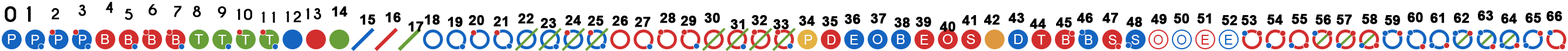
<style>
.page{position:relative;width:1568px;height:51px;background:#ffffff}
.page>*{position:absolute;margin:0}
.t1{font:19.6px "CaviarDreams-Bold";color:#000000;font-weight:bold}
.t2{font:14px "CaviarDreams-Bold";color:#000000;font-weight:bold}
.t3{font:14px "Arial-BoldMT";color:#000000;font-weight:bold}
</style>
<div class="page">
<p class="t1" style="left:5px;top:6px;width:11px;height:16px">0</p>
<p class="t1" style="left:26px;top:6px;width:5px;height:16px">1</p>
<p class="t2" style="left:78px;top:5px;width:8px;height:11px">3</p>
<p class="t2" style="left:105px;top:2px;width:8px;height:11px">4</p>
<p class="t2" style="left:149px;top:4px;width:8px;height:12px">6</p>
<p class="t2" style="left:174px;top:6px;width:8px;height:12px">7</p>
<p class="t2" style="left:192px;top:6px;width:9px;height:12px">8</p>
<p class="t2" style="left:51px;top:8px;width:8px;height:12px">2</p>
<p class="t2" style="left:125px;top:9px;width:8px;height:11px">5</p>
<p class="t2" style="left:218px;top:6px;width:8px;height:12px">9</p>
<p class="t2" style="left:237px;top:9px;width:15px;height:11px">10</p>
<p class="t2" style="left:262px;top:12px;width:13px;height:11px">11</p>
<p class="t2" style="left:286px;top:11px;width:15px;height:12px">12</p>
<p class="t2" style="left:306px;top:8px;width:15px;height:12px">13</p>
<p class="t3" style="left:332px;top:6px;width:16px;height:11px">14</p>
<p class="t3" style="left:360px;top:15px;width:16px;height:10px">15</p>
<p class="t3" style="left:386px;top:12px;width:15px;height:11px">16</p>
<p class="t3" style="left:425px;top:15px;width:15px;height:10px">18</p>
<p class="t3" style="left:448px;top:17px;width:15px;height:10px">19</p>
<p class="t3" style="left:469px;top:15px;width:15px;height:11px">20</p>
<p class="t3" style="left:493px;top:16px;width:15px;height:11px">21</p>
<p class="t3" style="left:518px;top:13px;width:16px;height:11px">22</p>
<p class="t3" style="left:565px;top:15px;width:16px;height:11px">24</p>
<p class="t3" style="left:587px;top:16px;width:17px;height:10px">25</p>
<p class="t3" style="left:612px;top:16px;width:16px;height:10px">26</p>
<p class="t3" style="left:635px;top:17px;width:16px;height:10px">27</p>
<p class="t3" style="left:660px;top:13px;width:16px;height:10px">28</p>
<p class="t3" style="left:680px;top:16px;width:16px;height:10px">29</p>
<p class="t3" style="left:704px;top:13px;width:16px;height:10px">30</p>
<p class="t3" style="left:751px;top:15px;width:16px;height:11px">32</p>
<p class="t3" style="left:799px;top:16px;width:16px;height:10px">34</p>
<p class="t3" style="left:822px;top:16px;width:16px;height:11px">35</p>
<p class="t3" style="left:844px;top:14px;width:17px;height:11px">36</p>
<p class="t3" style="left:871px;top:13px;width:15px;height:11px">37</p>
<p class="t3" style="left:894px;top:18px;width:16px;height:10px">38</p>
<p class="t3" style="left:916px;top:17px;width:15px;height:10px">39</p>
<p class="t3" style="left:962px;top:15px;width:14px;height:11px">41</p>
<p class="t3" style="left:984px;top:15px;width:16px;height:10px">42</p>
<p class="t3" style="left:1009px;top:13px;width:15px;height:10px">43</p>
<p class="t3" style="left:1056px;top:18px;width:16px;height:10px">45</p>
<p class="t3" style="left:1077px;top:13px;width:16px;height:10px">46</p>
<p class="t3" style="left:1102px;top:13px;width:16px;height:10px">47</p>
<p class="t3" style="left:1126px;top:17px;width:16px;height:10px">48</p>
<p class="t3" style="left:1151px;top:14px;width:16px;height:11px">49</p>
<p class="t3" style="left:1174px;top:13px;width:15px;height:11px">50</p>
<p class="t3" style="left:1197px;top:13px;width:14px;height:11px">51</p>
<p class="t3" style="left:1222px;top:15px;width:15px;height:11px">52</p>
<p class="t3" style="left:1242px;top:15px;width:15px;height:11px">53</p>
<p class="t3" style="left:1267px;top:15px;width:16px;height:10px">54</p>
<p class="t3" style="left:1292px;top:14px;width:16px;height:11px">55</p>
<p class="t3" style="left:1315px;top:15px;width:16px;height:10px">56</p>
<p class="t3" style="left:1336px;top:15px;width:16px;height:10px">57</p>
<p class="t3" style="left:1362px;top:14px;width:15px;height:11px">58</p>
<p class="t3" style="left:1385px;top:15px;width:15px;height:11px">59</p>
<p class="t3" style="left:1408px;top:12px;width:15px;height:11px">60</p>
<p class="t3" style="left:1431px;top:13px;width:14px;height:10px">61</p>
<p class="t3" style="left:1454px;top:13px;width:15px;height:10px">62</p>
<p class="t3" style="left:1478px;top:11px;width:15px;height:10px">63</p>
<p class="t3" style="left:1501px;top:13px;width:16px;height:11px">64</p>
<p class="t3" style="left:1525px;top:13px;width:16px;height:10px">65</p>
<p class="t3" style="left:1546px;top:11px;width:16px;height:11px">66</p>
<p class="t3" style="left:408px;top:22px;width:16px;height:10px">17</p>
<p class="t3" style="left:541px;top:18px;width:15px;height:11px">23</p>
<p class="t3" style="left:730px;top:19px;width:15px;height:11px">31</p>
<p class="t3" style="left:773px;top:19px;width:16px;height:11px">33</p>
<p class="t3" style="left:940px;top:22px;width:15px;height:10px">40</p>
<p class="t3" style="left:1030px;top:19px;width:16px;height:10px">44</p>
</div>
